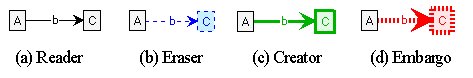
<style>
.page{position:relative;width:473px;height:78px;background:#ffffff}
.page>*{position:absolute;margin:0}
.t1{font:18px "TimesNewRomanPSMT";letter-spacing:-0.05em;color:#000000}
</style>
<div class="page">
<p class="t1" style="left:16px;top:50px;width:435px;height:17px">(a) Reader              (b) Eraser            (c) Creator            (d) Embargo</p>
</div>
